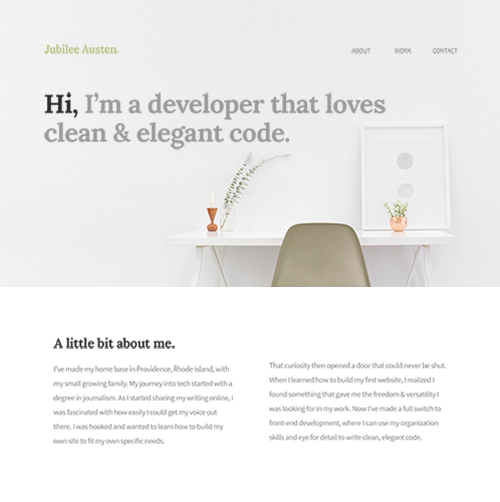
<style>
.page{position:relative;width:500px;height:502px;background:#ffffff}
.page>*{position:absolute;margin:0}
.t1{font:10.8px "Lora-Bold";letter-spacing:-0.02em;color:#bbc085}
.t2{font:6.5px "SourceSansPro-Regular";letter-spacing:-0.02em;color:#828282;text-transform:uppercase}
.t3{font:25.8px/28.7px "Lora-Bold";letter-spacing:-0.02em;color:#9b9b9b}
.t4{font:25.8px/28.7px "Lora-Bold";letter-spacing:-0.02em;color:#2b2b2b}
.t5{font:12.9px "Lora-Bold";letter-spacing:-0.02em;color:#2b2b2b}
.t6{font:7.5px/14.3px "SourceSansPro-Regular";letter-spacing:-0.02em}
.t7{font:7.5px/14.3px "SourceSansPro-Regular";letter-spacing:-0.02em;color:#7f7f7f}
</style>
<div class="page">
<p class="t1" style="left:44px;top:44px;width:74px;height:10px">Jubilee Austen</p>
<p class="t2" style="left:351px;top:48px;width:107px;height:6px">about                     work               contact</p>
<p class="t3" style="left:44px;top:92px;width:342px;height:58px"><span class="t4">Hi,</span> I’m a developer that loves <br>clean &amp; elegant code.</p>
<p class="t5" style="left:53px;top:337px;width:122px;height:12px">A little bit about me.</p>
<p class="t6" style="left:53px;top:365px;width:180px;height:81px">I've made my home base in Providence, Rhode Island, with my small growing family. My journey into tech started with a degree in journalism. As I started sharing my writing online, I was fascinated with how easily I could get my voice out there. I was hooked and wanted to learn how to build my own site to fit my own specific needs.</p>
<p class="t7" style="left:269px;top:362px;width:177px;height:80px">That curiosity then opened a door that could never be shut. When I learned how to build my first website, I realized I found something that gave me the freedom &amp; versatility I was looking for in my work. Now I've made a full switch to front-end development, where I can use my organization skills and eye for detail to write clean, elegant code.</p>
</div>
